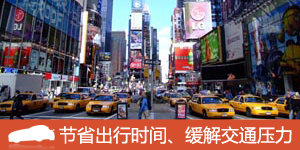
<style>
.page{position:relative;width:300px;height:150px}
.page>*{position:absolute;margin:0}
.t1{font:18px "MicrosoftYaHei";color:#ffffff}
</style>
<div class="page">
<p class="t1" style="left:59px;top:126px;width:233px;height:18px">节省出行时间、缓解交通压力</p>
</div>
